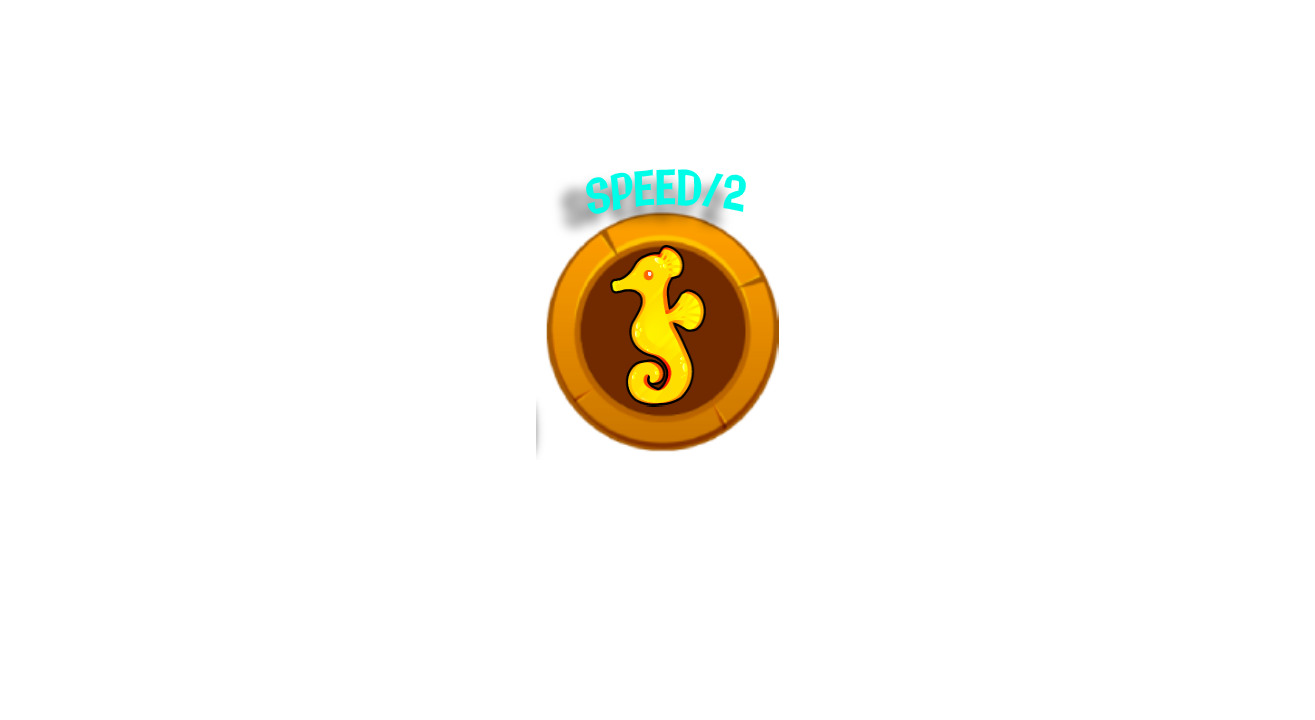
<style>
.page{position:relative;width:1315px;height:720px;background:#ffffff}
.page>*{position:absolute;margin:0}
.t1{font:47.9px "Galindo-Regular";color:#0ffde9;scale:0.71 1}
</style>
<div class="page">
<p class="t1" style="left:586px;top:169px;width:160px;height:45px">SPEED/2</p>
</div>
